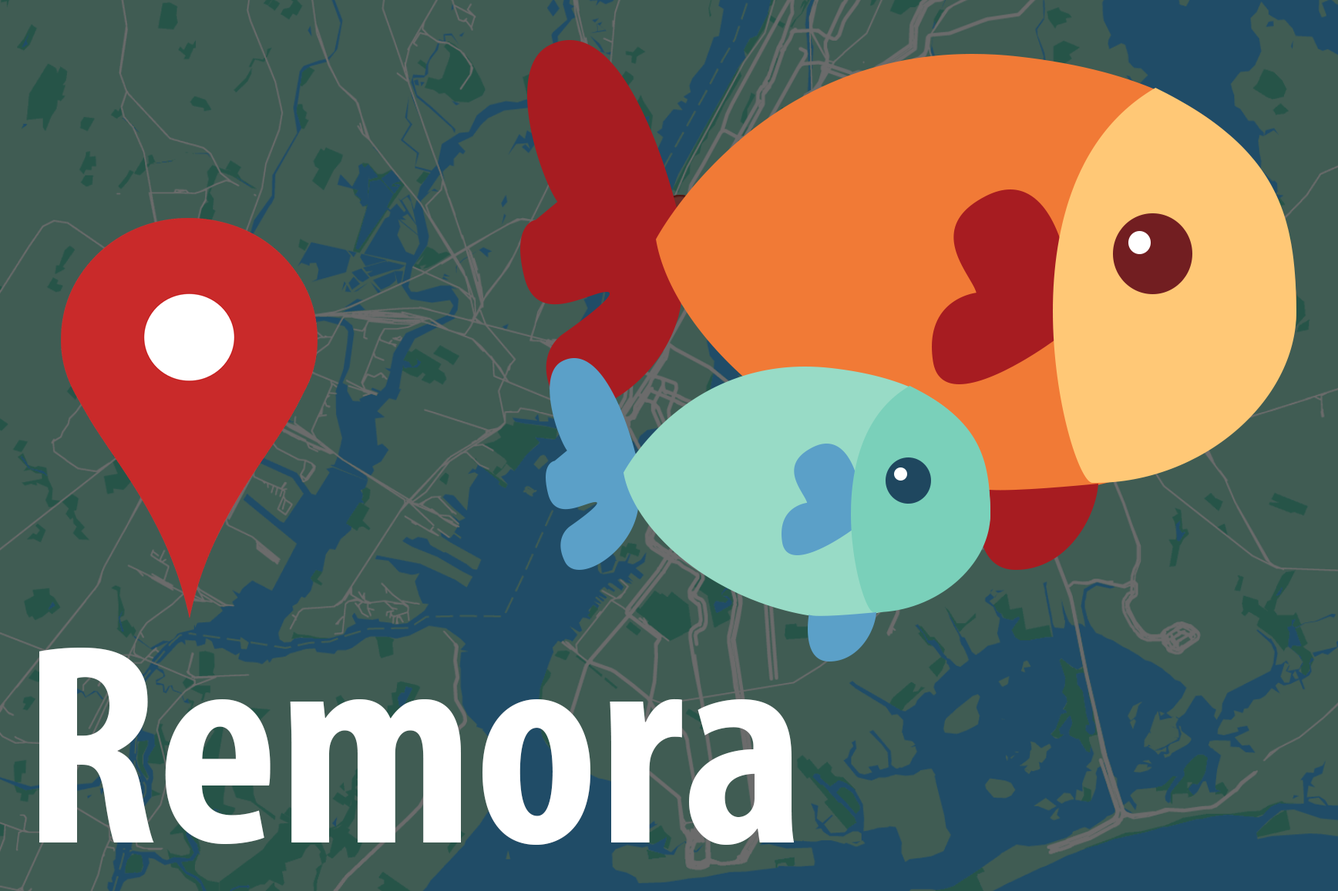
<style>
.page{position:relative;width:1338px;height:891px;background:#405c53}
.page>*{position:absolute;margin:0}
.t1{font:288.4px "MyriadPro-BoldCond";color:#ffffff}
</style>
<div class="page">
<p class="t1" style="left:39px;top:648px;width:755px;height:198px">Remora</p>
</div>
